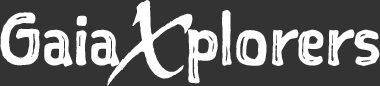
<style>
.page{position:relative;width:380px;height:86px;background:#333333}
.page>*{position:absolute;margin:0}
.t1{font:71.5px "SketchnoteSquare";letter-spacing:-0.02em;color:#ffffff}
.t2{font:71.5px "SketchnoteSquare";letter-spacing:-0.1em;color:#ffffff}
.t3{font:103.7px "BansheeStd";color:#ffffff}
</style>
<div class="page">
<p class="t1" style="left:0px;top:0px;width:380px;height:86px">Gai<span class="t2">a</span><span class="t3">X</span>plorers</p>
</div>
